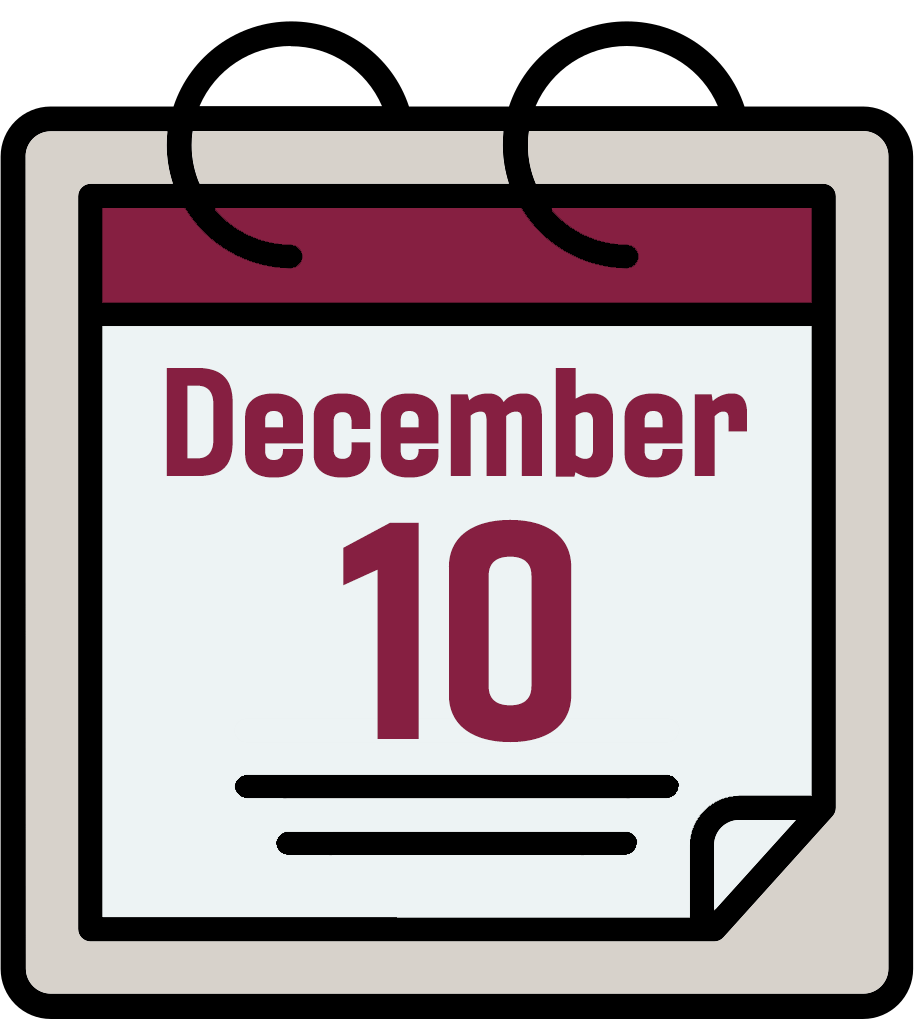
<style>
.page{position:relative;width:914px;height:1019px;background:#edf3f4}
.page>*{position:absolute;margin:0}
.t1{font:150px "Gineso-ConBol";color:#861f41}
.t2{font:300px "Gineso-ConBol";color:#861f41}
</style>
<div class="page">
<p class="t1" style="left:166px;top:368px;width:581px;height:110px">December</p>
<p class="t2" style="left:343px;top:519px;width:229px;height:224px">10</p>
</div>
